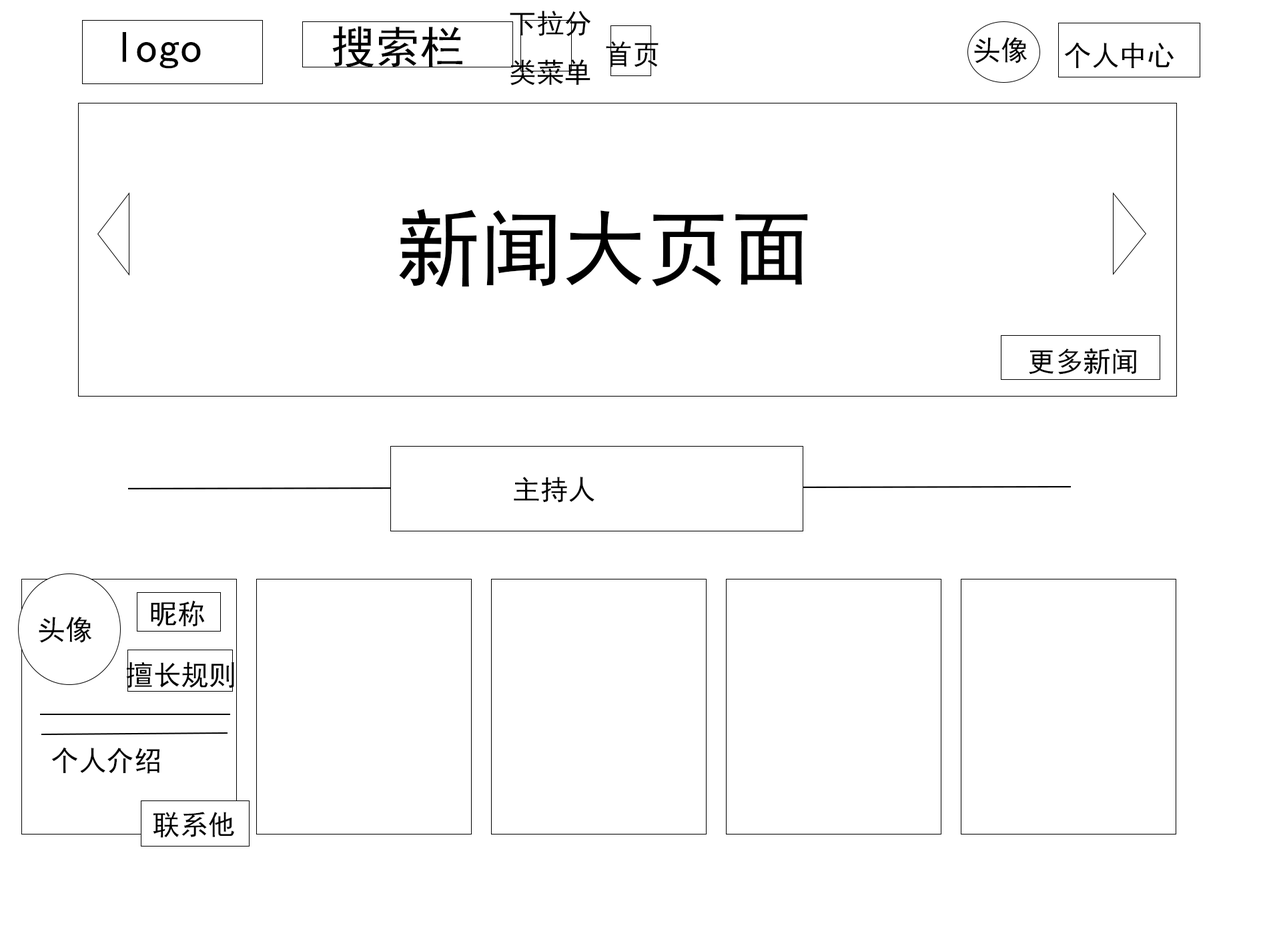
<style>
.page{position:relative;width:1261px;height:946px;background:#ffffff}
.page>*{position:absolute;margin:0}
.t1{font:27.8px "SimHei";color:#000000}
.t2{font:44.5px "SimHei";color:#000000}
.t3{font:83.4px "SimHei";color:#000000}
</style>
<div class="page">
<p class="t1" style="left:510px;top:11px;width:81px;height:74px">下拉分<br>类菜单</p>
<p class="t2" style="left:332px;top:26px;width:130px;height:41px">搜索栏</p>
<p class="t2" style="left:122px;top:32px;width:79px;height:37px">logo</p>
<p class="t1" style="left:606px;top:41px;width:53px;height:26px">首页</p>
<p class="t1" style="left:974px;top:37px;width:54px;height:26px">头像</p>
<p class="t1" style="left:1064px;top:42px;width:110px;height:26px">个人中心</p>
<p class="t3" style="left:399px;top:208px;width:409px;height:79px">新闻大页面</p>
<p class="t1" style="left:1029px;top:348px;width:107px;height:26px">更多新闻</p>
<p class="t1" style="left:514px;top:476px;width:81px;height:26px">主持人</p>
<p class="t1" style="left:151px;top:600px;width:54px;height:27px">昵称</p>
<p class="t1" style="left:39px;top:616px;width:53px;height:27px">头像</p>
<p class="t1" style="left:126px;top:661px;width:108px;height:27px">擅长规则</p>
<p class="t1" style="left:51px;top:747px;width:109px;height:26px">个人介绍</p>
<p class="t1" style="left:153px;top:811px;width:81px;height:26px">联系他</p>
</div>
